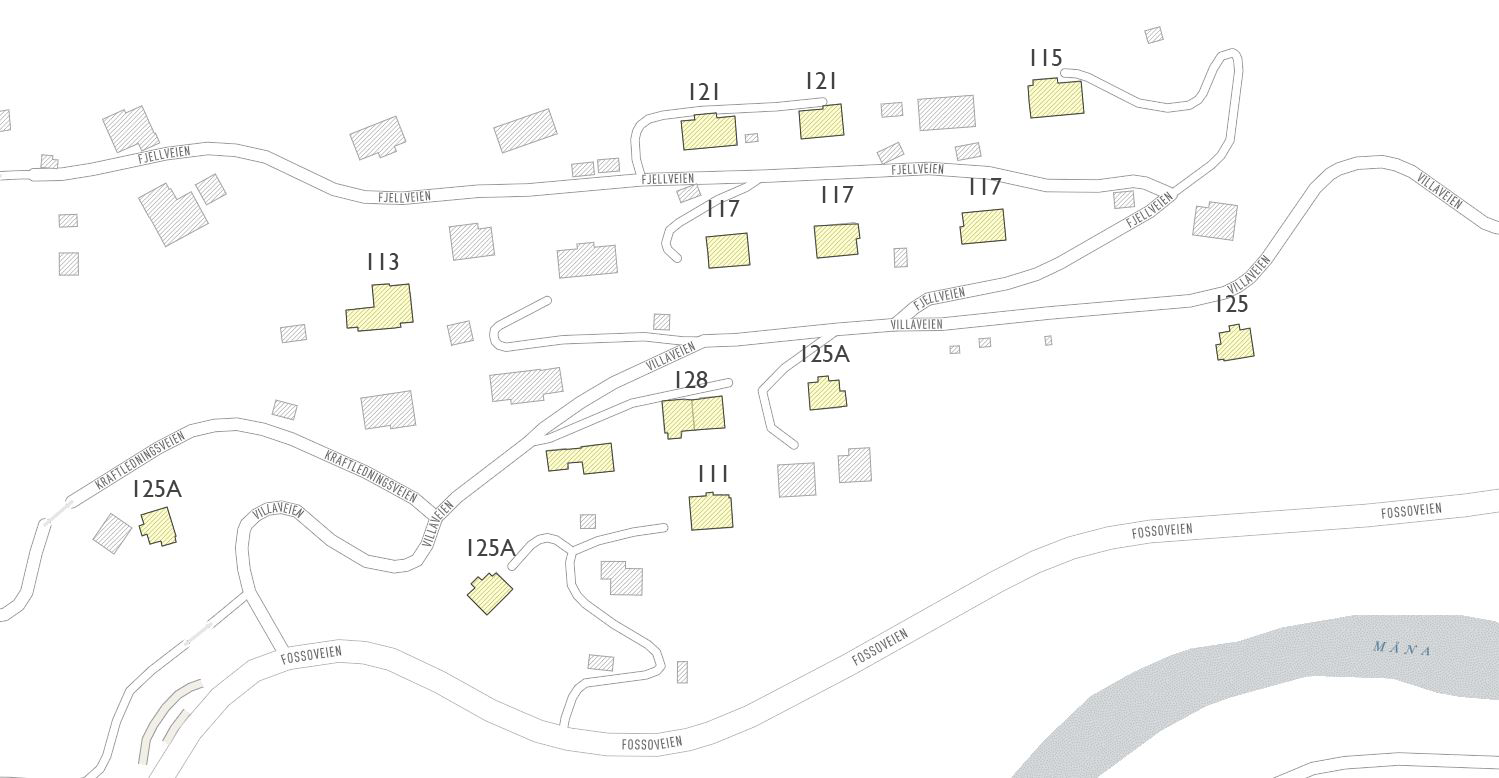
<style>
.page{position:relative;width:1499px;height:778px;background:#ffffff}
.page>*{position:absolute;margin:0}
.t1{font:24px "GillSansMT";color:#434343}
</style>
<div class="page">
<p class="t1" style="left:1031px;top:49px;width:31px;height:17px">115</p>
<p class="t1" style="left:807px;top:72px;width:28px;height:17px">121</p>
<p class="t1" style="left:690px;top:83px;width:28px;height:17px">121</p>
<p class="t1" style="left:970px;top:178px;width:32px;height:17px">117</p>
<p class="t1" style="left:822px;top:186px;width:32px;height:17px">117</p>
<p class="t1" style="left:708px;top:200px;width:32px;height:17px">117</p>
<p class="t1" style="left:368px;top:253px;width:31px;height:17px">113</p>
<p class="t1" style="left:1217px;top:295px;width:31px;height:17px">125</p>
<p class="t1" style="left:802px;top:345px;width:48px;height:17px">125A</p>
<p class="t1" style="left:676px;top:371px;width:32px;height:17px">128</p>
<p class="t1" style="left:699px;top:465px;width:28px;height:17px">111</p>
<p class="t1" style="left:134px;top:480px;width:48px;height:17px">125A</p>
<p class="t1" style="left:468px;top:539px;width:48px;height:17px">125A</p>
</div>
